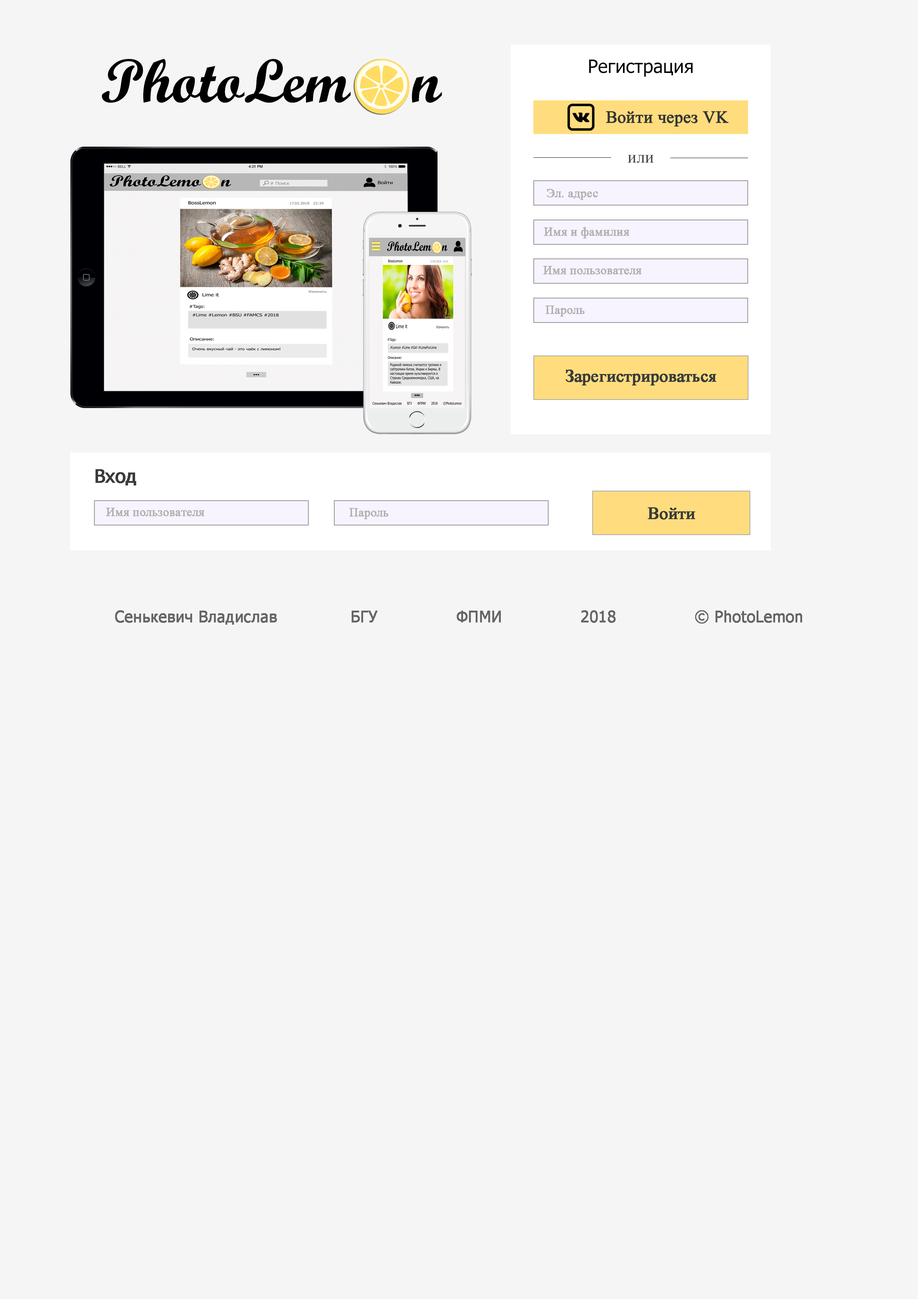
<style>
.page{position:relative;width:918px;height:1299px;background:#f6f5f5}
.page>*{position:absolute;margin:0}
.t1{font:61.7px "ScriptMTBold";color:#000000}
.t2{font:18.5px "Tahoma";color:#000000}
.t3{font:17px "TimesNewRomanPSMT";color:#343434;font-weight:bold}
.t4{font:17px "TimesNewRomanPSMT";color:#3e3e3e}
.t5{font:12.3px "TimesNewRomanPSMT";color:#b2b1b1;font-weight:bold}
.t6{font:17px "TimesNewRomanPSMT";color:#3c3c3c;font-weight:bold}
.t7{font:18.5px "Tahoma";color:#3c3c3c;font-weight:bold}
.t8{font:15.4px "Tahoma";color:#666666;font-weight:bold}
</style>
<div class="page">
<p class="t1" style="left:102px;top:59px;width:340px;height:44px">PhotoLem    n</p>
<p class="t2" style="left:589px;top:59px;width:104px;height:18px">Регистрация</p>
<p class="t3" style="left:606px;top:111px;width:123px;height:16px">Войти через VK</p>
<p class="t4" style="left:628px;top:155px;width:26px;height:8px">или</p>
<p class="t5" style="left:547px;top:189px;width:51px;height:11px">Эл. адрес</p>
<p class="t5" style="left:544px;top:227px;width:85px;height:11px">Имя и фамилия</p>
<p class="t5" style="left:543px;top:266px;width:99px;height:8px">Имя пользователя</p>
<p class="t5" style="left:546px;top:305px;width:39px;height:12px">Пароль</p>
<p class="t6" style="left:566px;top:369px;width:150px;height:16px">Зарегистрироваться</p>
<p class="t7" style="left:96px;top:469px;width:40px;height:16px">Вход</p>
<p class="t5" style="left:106px;top:508px;width:98px;height:8px">Имя пользователя</p>
<p class="t5" style="left:349px;top:508px;width:39px;height:11px">Пароль</p>
<p class="t6" style="left:648px;top:507px;width:47px;height:12px">Войти</p>
<p class="t8" style="left:115px;top:610px;width:687px;height:15px">Cенькевич Владислав              БГУ               ФПМИ               2018               © PhotoLemon</p>
</div>
